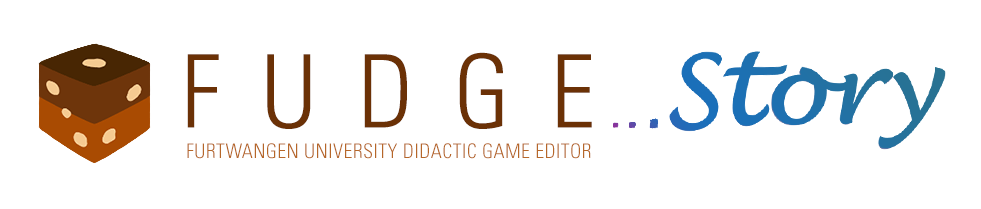
<style>
.page{position:relative;width:981px;height:209px;background:#ffffff}
.page>*{position:absolute;margin:0}
.t1{font:101px "Univers-CondensedLight";letter-spacing:0.4em;color:#6b3106}
.t2{font:20px "Univers-CondensedLight";letter-spacing:0.02em;color:#b66729}
</style>
<div class="page">
<p class="t1" style="left:187px;top:52px;width:405px;height:77px">FUDGE</p>
<p class="t2" style="left:187px;top:143px;width:404px;height:16px">FURTWANGEN UNIVERSITY DIDACTIC GAME EDITOR</p>
</div>
